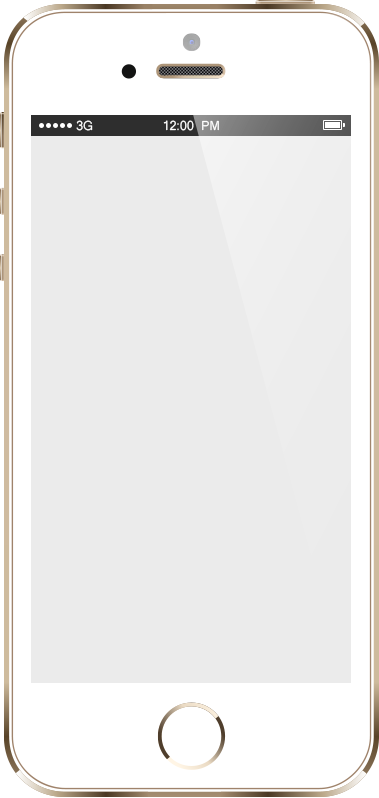
<style>
.page{position:relative;width:379px;height:798px;background:#ebebeb}
.page>*{position:absolute;margin:0}
.t1{font:12px "Kartika";color:#ffffff}
</style>
<div class="page">
<p class="t1" style="left:76px;top:120px;width:17px;height:11px">3G</p>
<p class="t1" style="left:163px;top:120px;width:56px;height:11px">12:00 PM</p>
</div>
